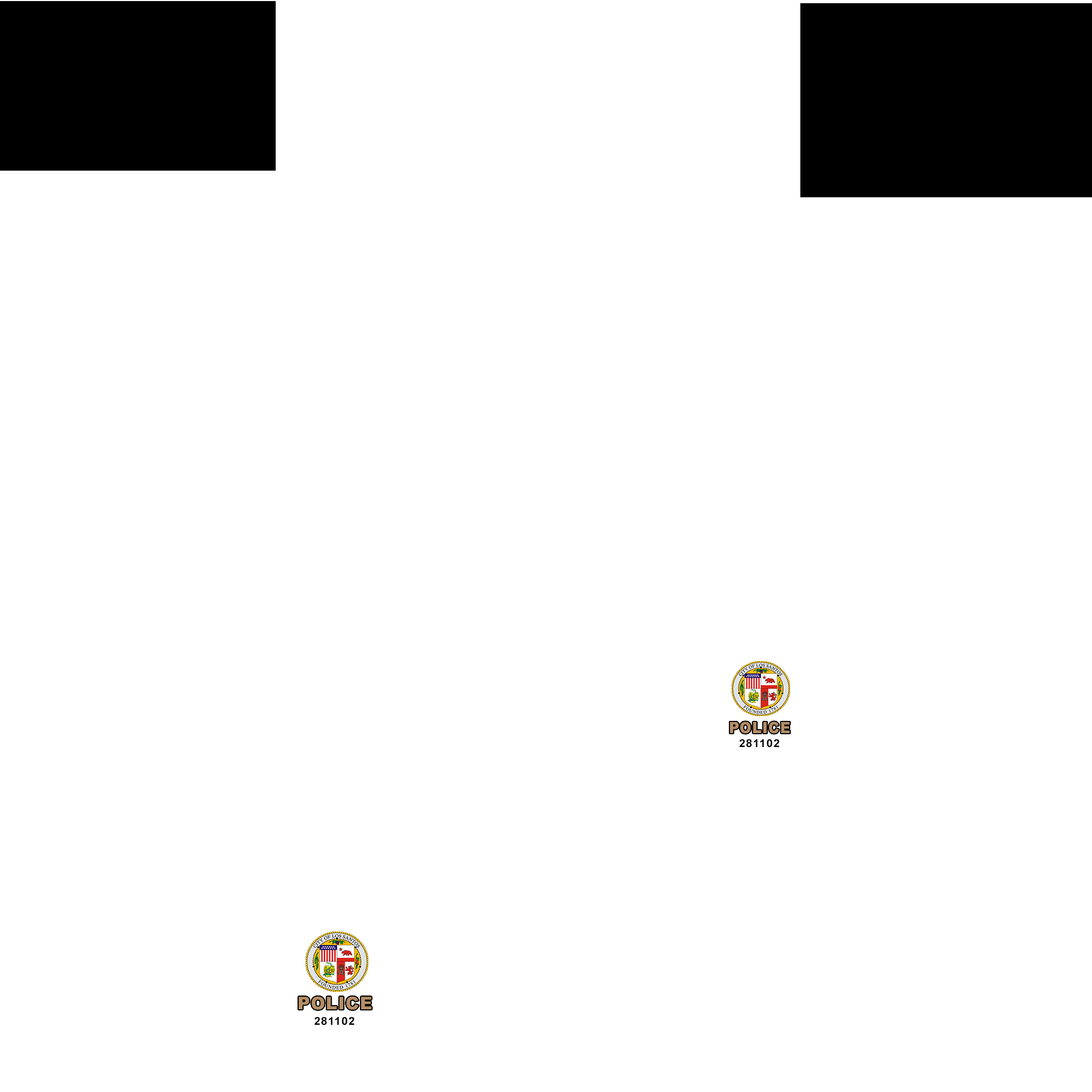
<style>
.page{position:relative;width:1092px;height:1092px;background:#ffffff}
.page>*{position:absolute;margin:0}
.t1{font:26.7px "Arial-Black";letter-spacing:0.05em;color:#b68e66;scale:0.9 1}
.t2{font:18.8px "Arial-BoldMT";letter-spacing:0.05em;color:#000000;scale:1.06 1}
.t3{font:30.1px "Arial-Black";letter-spacing:0.05em;color:#b68e66}
</style>
<div class="page">
<p class="t1" style="left:730px;top:721px;width:60px;height:13px">POLICE</p>
<p class="t2" style="left:739px;top:739px;width:41px;height:9px">281102</p>
<p class="t3" style="left:299px;top:997px;width:73px;height:13px">POLICE</p>
<p class="t2" style="left:314px;top:1017px;width:41px;height:8px">281102</p>
</div>
